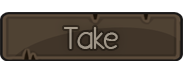
<style>
.page{position:relative;width:183px;height:61px;background:#ffffff}
.page>*{position:absolute;margin:0}
.t1{font:32.9px "AnisaSans";letter-spacing:-0.025em;color:#a09688}
</style>
<div class="page">
<p class="t1" style="left:64px;top:27px;width:54px;height:22px">Take</p>
</div>
